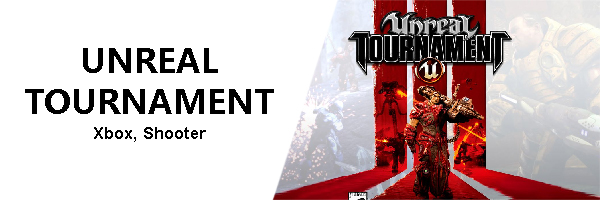
<style>
.page{position:relative;width:600px;height:200px;background:#ffffff}
.page>*{position:absolute;margin:0}
.t1{font:33.3px/41.7px "MicrosoftYaHei-Bold";color:#000000}
.t2{font:16.7px/25px "Arial-BoldMT";color:#000000}
</style>
<div class="page">
<p class="t1" style="left:25px;top:48px;width:249px;height:94px;text-align:center">UNREAL TOURNAMENT<br><span class="t2">Xbox, Shooter</span></p>
</div>
